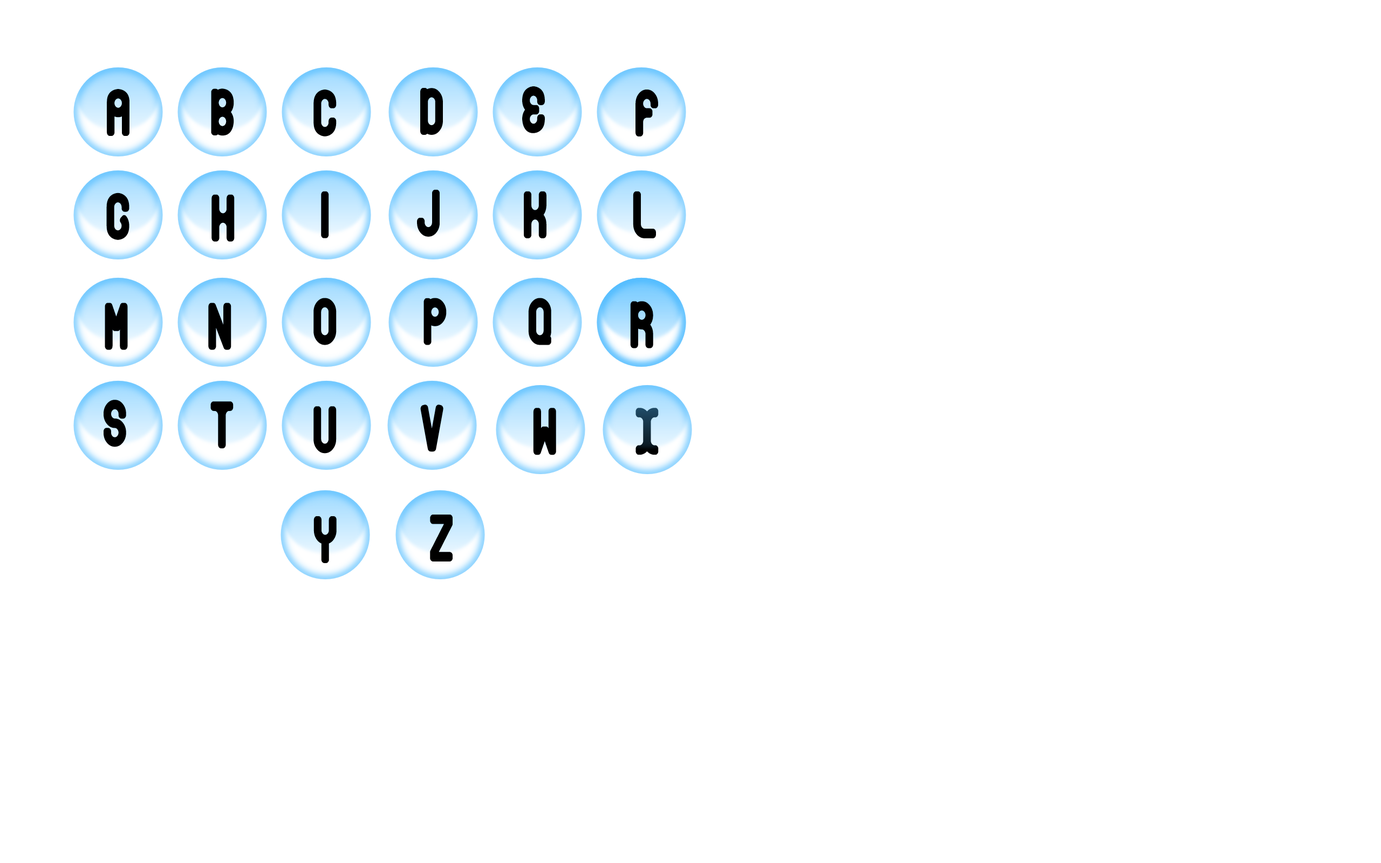
<style>
.page{position:relative;width:1381px;height:863px;background:#ffffff}
.page>*{position:absolute;margin:0}
.t1{font:46.8px "BubbleClubCondensed";color:#000000}
.t2{font:46.8px "BubbleClubCondensed"}
</style>
<div class="page">
<p class="t1" style="left:107px;top:89px;width:22px;height:47px">A</p>
<p class="t1" style="left:211px;top:88px;width:23px;height:48px">B</p>
<p class="t1" style="left:313px;top:90px;width:24px;height:47px">C</p>
<p class="t1" style="left:420px;top:88px;width:23px;height:47px">D</p>
<p class="t1" style="left:522px;top:86px;width:23px;height:47px">E</p>
<p class="t1" style="left:636px;top:90px;width:22px;height:47px">F</p>
<p class="t1" style="left:106px;top:193px;width:23px;height:47px">G</p>
<p class="t1" style="left:212px;top:194px;width:23px;height:48px">H</p>
<p class="t1" style="left:321px;top:191px;width:8px;height:47px">I</p>
<p class="t1" style="left:417px;top:189px;width:23px;height:48px">J</p>
<p class="t1" style="left:524px;top:191px;width:23px;height:47px">K</p>
<p class="t1" style="left:633px;top:191px;width:23px;height:47px">L</p>
<p class="t1" style="left:105px;top:303px;width:23px;height:47px">M</p>
<p class="t1" style="left:208px;top:303px;width:23px;height:47px">N</p>
<p class="t1" style="left:313px;top:298px;width:24px;height:47px">O</p>
<p class="t1" style="left:424px;top:298px;width:23px;height:47px">P</p>
<p class="t1" style="left:528px;top:298px;width:23px;height:47px">Q</p>
<p class="t1" style="left:630px;top:301px;width:23px;height:48px">R</p>
<p class="t1" style="left:104px;top:400px;width:22px;height:47px">S</p>
<p class="t1" style="left:210px;top:401px;width:24px;height:48px">T</p>
<p class="t1" style="left:313px;top:406px;width:24px;height:48px">U</p>
<p class="t1" style="left:420px;top:405px;width:24px;height:47px">V</p>
<p class="t1" style="left:533px;top:408px;width:23px;height:47px">W</p>
<p class="t2" style="left:636px;top:408px;width:23px;height:47px">X</p>
<p class="t1" style="left:313px;top:516px;width:24px;height:47px">Y</p>
<p class="t1" style="left:430px;top:515px;width:23px;height:47px">Z</p>
</div>
